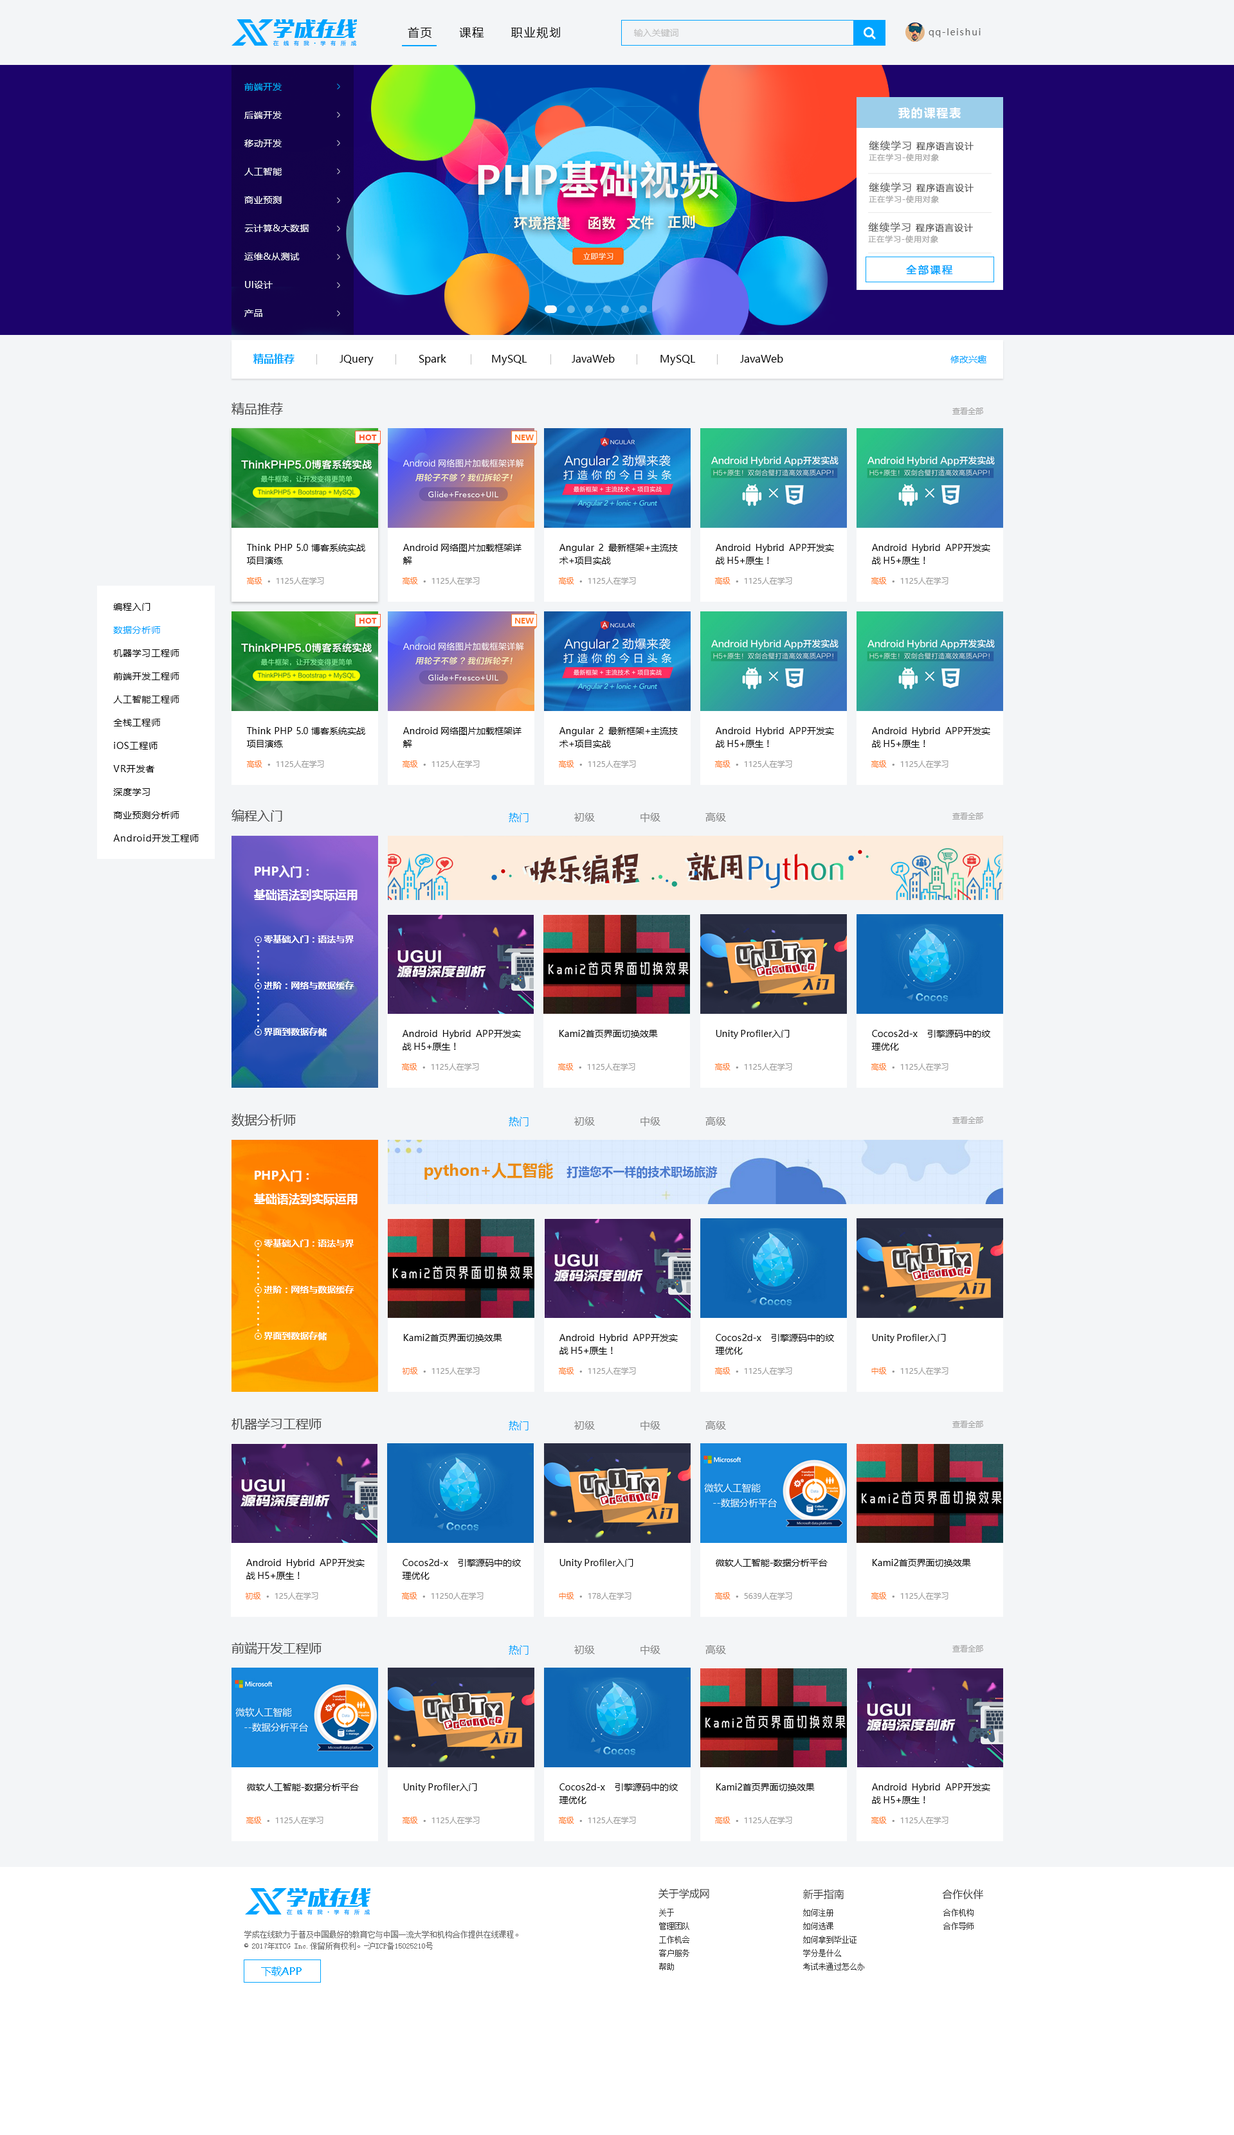
<style>
.page{position:relative;width:1234px;height:2135px;background:#f3f5f7}
.page>*{position:absolute;margin:0}
.t1{font:11.6px "MicrosoftYaHei";letter-spacing:0.1em;color:#050505}
.t2{font:9px "MicrosoftYaHei";color:#bfbfbf}
.t3{font:9px "MicrosoftYaHei";letter-spacing:0.1em;color:#666666}
.t4{font:5.1px "MicrosoftYaHei";letter-spacing:0.1em;color:#00a4ff;font-weight:bold}
.t5{font:9px/28.3px "MicrosoftYaHei";letter-spacing:0.05em;color:#ffffff}
.t6{font:9px/28.3px "MicrosoftYaHei";letter-spacing:0.05em;color:#00b4ff}
.t7{font:11.6px "MicrosoftYaHei-Bold";letter-spacing:0.1em;color:#ffffff}
.t8{font:7.7px/12.9px "FZLTCXHJW--GB1-0";color:#a5a5a5;font-weight:bold}
.t9{font:10.3px/12.9px "FZLTCXHJW--GB1-0";color:#4e4e4e;font-weight:bold}
.t10{font:9px/12.9px "FZLTCXHJW--GB1-0";color:#4e4e4e;font-weight:bold}
.t11{font:10.3px "MicrosoftYaHei";letter-spacing:0.1em;color:#00a4ff;font-weight:bold}
.t12{font:10.3px "MicrosoftYaHei";color:#050505}
.t13{font:10.3px "MicrosoftYaHei-Bold";color:#00a4ff}
.t14{font:9px "MicrosoftYaHei";color:#00a4ff}
.t15{font:12.9px "MicrosoftYaHei";color:#494949}
.t16{font:7.7px "MicrosoftYaHei";color:#a5a5a5}
.t17{font:7.7px "MicrosoftYaHei-Bold";color:#ff592d}
.t18{font:7.7px "MicrosoftYaHei-Bold";color:#ff7c2d}
.t19{font:9px/12.9px "MicrosoftYaHei";color:#050505}
.t20{font:7.7px "MicrosoftYaHei";color:#999999}
.t21{font:7.7px "MicrosoftYaHei";color:#ff7c2d}
.t22{font:9px/23.1px "MicrosoftYaHei";letter-spacing:0.05em;color:#000000}
.t23{font:9px/23.1px "MicrosoftYaHei";letter-spacing:0.05em;color:#00a4ff}
.t24{font:10.3px "MicrosoftYaHei";color:#868686}
.t25{font:10.3px "MicrosoftYaHei";color:#00a4ff}
.t26{font:9px/23.1px "MicrosoftYaHei-Bold";color:#ffffff}
.t27{font:11.6px/23.1px "MicrosoftYaHei-Bold";color:#ffffff}
.t28{font:9px "MicrosoftYaHei";color:#050505}
.t29{font:11.6px "MicrosoftYaHei-Bold";color:#4a7ace}
.t30{font:15.4px "MicrosoftYaHei-Bold";color:#ea8c11}
.t31{font:10.3px "MicrosoftYaHei";color:#333333}
.t32{font:7.7px/13.5px "SimSun";color:#333333}
.t33{font:7.7px/11.6px "SimSun";color:#666666}
</style>
<div class="page">
<p class="t1" style="left:408px;top:27px;width:152px;height:12px">首页      课程      职业规划</p>
<p class="t2" style="left:634px;top:29px;width:44px;height:8px">输入关键词</p>
<p class="t3" style="left:928px;top:28px;width:52px;height:9px">qq-leishui</p>
<p class="t4" style="left:273px;top:40px;width:84px;height:6px">在  线  有  我     学  有  所  成</p>
<p class="t5" style="left:244px;top:83px;width:65px;height:234px"><span class="t6">前端开发<br></span>后端开发<br>移动开发<br>人工智能<br>商业预测<br>云计算&amp;大数据<br>运维&amp;从测试<br>UI设计<br>产品</p>
<p class="t7" style="left:898px;top:107px;width:62px;height:12px">我的课程表</p>
<p class="t8" style="left:869px;top:140px;width:104px;height:21px;text-align:justify"><span class="t9">继续学习 </span><span class="t10">程序语言设计<br></span>正在学习-使用对象</p>
<p class="t8" style="left:869px;top:182px;width:104px;height:21px;text-align:justify"><span class="t9">继续学习 </span><span class="t10">程序语言设计<br></span>正在学习-使用对象</p>
<p class="t8" style="left:868px;top:222px;width:105px;height:21px;text-align:justify"><span class="t9">继续学习 </span><span class="t10">程序语言设计<br></span>正在学习-使用对象</p>
<p class="t11" style="left:906px;top:265px;width:47px;height:10px">全部课程</p>
<p class="t12" style="left:253px;top:354px;width:733px;height:11px"><span class="t13">精品推荐              </span>JQuery              Spark              MySQL              JavaWeb              MySQL              JavaWeb                                                    <span class="t14">修改兴趣</span></p>
<p class="t15" style="left:231px;top:402px;width:52px;height:13px">精品推荐</p>
<p class="t16" style="left:952px;top:408px;width:31px;height:7px">查看全部</p>
<p class="t17" style="left:359px;top:435px;width:18px;height:5px">HOT</p>
<p class="t18" style="left:515px;top:435px;width:19px;height:5px">NEW</p>
<p class="t19" style="left:247px;top:544px;width:118px;height:20px;text-align:justify">Think PHP 5.0 博客系统实战项目演练</p>
<p class="t19" style="left:403px;top:544px;width:118px;height:20px;text-align:justify">Android 网络图片加载框架详解</p>
<p class="t19" style="left:559px;top:544px;width:119px;height:20px;text-align:justify">Angular 2 最新框架+主流技术+项目实战</p>
<p class="t19" style="left:716px;top:544px;width:118px;height:20px;text-align:justify">Android Hybrid APP开发实战 H5+原生！</p>
<p class="t19" style="left:872px;top:544px;width:118px;height:20px;text-align:justify">Android Hybrid APP开发实战 H5+原生！</p>
<p class="t20" style="left:246px;top:577px;width:78px;height:7px"><span class="t21">高级  </span>•  1125人在学习</p>
<p class="t20" style="left:402px;top:577px;width:78px;height:7px"><span class="t21">高级  </span>•  1125人在学习</p>
<p class="t20" style="left:558px;top:577px;width:78px;height:7px"><span class="t21">高级  </span>•  1125人在学习</p>
<p class="t20" style="left:714px;top:577px;width:78px;height:7px"><span class="t21">高级  </span>•  1125人在学习</p>
<p class="t20" style="left:870px;top:577px;width:78px;height:7px"><span class="t21">高级  </span>•  1125人在学习</p>
<p class="t22" style="left:113px;top:603px;width:86px;height:239px">编程入门<br> <span class="t23"> 数据分析师<br></span>  机器学习工程师<br>  前端开发工程师<br>  人工智能工程师<br>  全栈工程师<br>  iOS工程师<br>  VR开发者<br>  深度学习<br>  商业预测分析师<br>  Android开发工程师</p>
<p class="t17" style="left:359px;top:618px;width:18px;height:6px">HOT</p>
<p class="t18" style="left:515px;top:618px;width:19px;height:6px">NEW</p>
<p class="t19" style="left:247px;top:727px;width:118px;height:21px;text-align:justify">Think PHP 5.0 博客系统实战项目演练</p>
<p class="t19" style="left:403px;top:727px;width:118px;height:21px;text-align:justify">Android 网络图片加载框架详解</p>
<p class="t19" style="left:559px;top:727px;width:119px;height:21px;text-align:justify">Angular 2 最新框架+主流技术+项目实战</p>
<p class="t19" style="left:716px;top:727px;width:118px;height:21px;text-align:justify">Android Hybrid APP开发实战 H5+原生！</p>
<p class="t19" style="left:872px;top:727px;width:118px;height:21px;text-align:justify">Android Hybrid APP开发实战 H5+原生！</p>
<p class="t20" style="left:246px;top:760px;width:78px;height:8px"><span class="t21">高级  </span>•  1125人在学习</p>
<p class="t20" style="left:402px;top:760px;width:78px;height:8px"><span class="t21">高级  </span>•  1125人在学习</p>
<p class="t20" style="left:558px;top:760px;width:78px;height:8px"><span class="t21">高级  </span>•  1125人在学习</p>
<p class="t20" style="left:714px;top:760px;width:78px;height:8px"><span class="t21">高级  </span>•  1125人在学习</p>
<p class="t20" style="left:870px;top:760px;width:78px;height:8px"><span class="t21">高级  </span>•  1125人在学习</p>
<p class="t15" style="left:231px;top:809px;width:51px;height:13px">编程入门</p>
<p class="t24" style="left:509px;top:813px;width:217px;height:9px"><span class="t25">热门</span>              初级              中级              高级</p>
<p class="t16" style="left:952px;top:813px;width:31px;height:7px">查看全部</p>
<p class="t26" style="left:254px;top:865px;width:103px;height:171px;text-align:justify"><span class="t27">PHP入门：<br>基础语法到实际运用<br><br></span>    零基础入门：语法与界<br><br>    进阶：网络与数据缓存<br><br>    界面到数据存储</p>
<p class="t19" style="left:402px;top:1030px;width:119px;height:20px;text-align:justify">Android Hybrid APP开发实战 H5+原生！</p>
<p class="t28" style="left:559px;top:1030px;width:99px;height:8px">Kami2首页界面切换效果</p>
<p class="t28" style="left:716px;top:1030px;width:73px;height:9px">Unity Profiler入门</p>
<p class="t19" style="left:871px;top:1030px;width:119px;height:20px;text-align:justify">Cocos2d-x 引擎源码中的纹理优化</p>
<p class="t20" style="left:401px;top:1063px;width:78px;height:7px"><span class="t21">高级  </span>•  1125人在学习</p>
<p class="t20" style="left:557px;top:1063px;width:78px;height:7px"><span class="t21">高级  </span>•  1125人在学习</p>
<p class="t20" style="left:714px;top:1063px;width:78px;height:7px"><span class="t21">高级  </span>•  1125人在学习</p>
<p class="t20" style="left:870px;top:1063px;width:78px;height:7px"><span class="t21">高级  </span>•  1125人在学习</p>
<p class="t15" style="left:231px;top:1113px;width:65px;height:13px">数据分析师</p>
<p class="t24" style="left:509px;top:1117px;width:217px;height:9px"><span class="t25">热门</span>              初级              中级              高级</p>
<p class="t16" style="left:952px;top:1117px;width:31px;height:7px">查看全部</p>
<p class="t26" style="left:254px;top:1169px;width:103px;height:171px;text-align:justify"><span class="t27">PHP入门：<br>基础语法到实际运用<br><br></span>    零基础入门：语法与界<br><br>    进阶：网络与数据缓存<br><br>    界面到数据存储</p>
<p class="t29" style="left:424px;top:1163px;width:293px;height:17px"><span class="t30">python+人工智能   </span>打造您不一样的技术职场旅游</p>
<p class="t28" style="left:404px;top:1334px;width:98px;height:8px">Kami2首页界面切换效果</p>
<p class="t19" style="left:559px;top:1334px;width:119px;height:20px;text-align:justify">Android Hybrid APP开发实战 H5+原生！</p>
<p class="t19" style="left:715px;top:1334px;width:119px;height:20px;text-align:justify">Cocos2d-x 引擎源码中的纹理优化</p>
<p class="t28" style="left:872px;top:1334px;width:74px;height:9px">Unity Profiler入门</p>
<p class="t20" style="left:402px;top:1367px;width:78px;height:7px"><span class="t21">初级  </span>•  1125人在学习</p>
<p class="t20" style="left:558px;top:1367px;width:78px;height:7px"><span class="t21">高级  </span>•  1125人在学习</p>
<p class="t20" style="left:714px;top:1367px;width:78px;height:7px"><span class="t21">高级  </span>•  1125人在学习</p>
<p class="t20" style="left:871px;top:1367px;width:77px;height:7px"><span class="t21">中级  </span>•  1125人在学习</p>
<p class="t15" style="left:231px;top:1418px;width:90px;height:12px">机器学习工程师</p>
<p class="t24" style="left:509px;top:1421px;width:217px;height:9px"><span class="t25">热门</span>              初级              中级              高级</p>
<p class="t16" style="left:952px;top:1421px;width:31px;height:7px">查看全部</p>
<p class="t19" style="left:246px;top:1559px;width:118px;height:21px;text-align:justify">Android Hybrid APP开发实战 H5+原生！</p>
<p class="t19" style="left:402px;top:1559px;width:119px;height:21px;text-align:justify">Cocos2d-x 引擎源码中的纹理优化</p>
<p class="t28" style="left:559px;top:1559px;width:74px;height:9px">Unity Profiler入门</p>
<p class="t28" style="left:716px;top:1559px;width:111px;height:8px">微软人工智能-数据分析平台</p>
<p class="t28" style="left:872px;top:1559px;width:99px;height:8px">Kami2首页界面切换效果</p>
<p class="t20" style="left:245px;top:1592px;width:73px;height:7px"><span class="t21">初级  </span>•  125人在学习</p>
<p class="t20" style="left:401px;top:1592px;width:82px;height:7px"><span class="t21">高级  </span>•  11250人在学习</p>
<p class="t20" style="left:559px;top:1592px;width:72px;height:7px"><span class="t21">中级  </span>•  178人在学习</p>
<p class="t20" style="left:714px;top:1592px;width:78px;height:7px"><span class="t21">高级  </span>•  5639人在学习</p>
<p class="t20" style="left:870px;top:1592px;width:78px;height:7px"><span class="t21">高级  </span>•  1125人在学习</p>
<p class="t15" style="left:231px;top:1642px;width:90px;height:12px">前端开发工程师</p>
<p class="t24" style="left:509px;top:1645px;width:217px;height:10px"><span class="t25">热门</span>              初级              中级              高级</p>
<p class="t16" style="left:952px;top:1645px;width:31px;height:7px">查看全部</p>
<p class="t28" style="left:247px;top:1783px;width:112px;height:8px">微软人工智能-数据分析平台</p>
<p class="t28" style="left:403px;top:1783px;width:74px;height:9px">Unity Profiler入门</p>
<p class="t19" style="left:559px;top:1783px;width:119px;height:21px;text-align:justify">Cocos2d-x 引擎源码中的纹理优化</p>
<p class="t28" style="left:716px;top:1783px;width:99px;height:8px">Kami2首页界面切换效果</p>
<p class="t19" style="left:872px;top:1783px;width:118px;height:21px;text-align:justify">Android Hybrid APP开发实战 H5+原生！</p>
<p class="t20" style="left:246px;top:1817px;width:77px;height:7px"><span class="t21">高级  </span>•  1125人在学习</p>
<p class="t20" style="left:402px;top:1817px;width:78px;height:7px"><span class="t21">高级  </span>•  1125人在学习</p>
<p class="t20" style="left:558px;top:1817px;width:78px;height:7px"><span class="t21">高级  </span>•  1125人在学习</p>
<p class="t20" style="left:714px;top:1817px;width:78px;height:7px"><span class="t21">高级  </span>•  1125人在学习</p>
<p class="t20" style="left:870px;top:1817px;width:78px;height:7px"><span class="t21">高级  </span>•  1125人在学习</p>
<p class="t31" style="left:658px;top:1888px;width:51px;height:11px">关于学成网</p>
<p class="t31" style="left:803px;top:1889px;width:41px;height:11px">新手指南</p>
<p class="t31" style="left:942px;top:1889px;width:41px;height:11px">合作伙伴</p>
<p class="t4" style="left:286px;top:1909px;width:84px;height:6px">在  线  有  我     学  有  所  成</p>
<p class="t32" style="left:659px;top:1909px;width:30px;height:61px">关于<br>管理团队<br>工作机会<br>客户服务<br>帮助</p>
<p class="t32" style="left:803px;top:1909px;width:61px;height:61px">如何注册<br>如何选课<br>如何拿到毕业证<br>学分是什么<br>考试未通过怎么办</p>
<p class="t32" style="left:943px;top:1909px;width:30px;height:21px">合作机构<br>合作导师</p>
<p class="t33" style="left:244px;top:1931px;width:274px;height:19px">学成在线致力于普及中国最好的教育它与中国一流大学和机构合作提供在线课程。<br>© 2017年XTCG Inc.保留所有权利。-沪ICP备15025210号</p>
<p class="t25" style="left:261px;top:1967px;width:41px;height:9px">下载APP</p>
</div>
